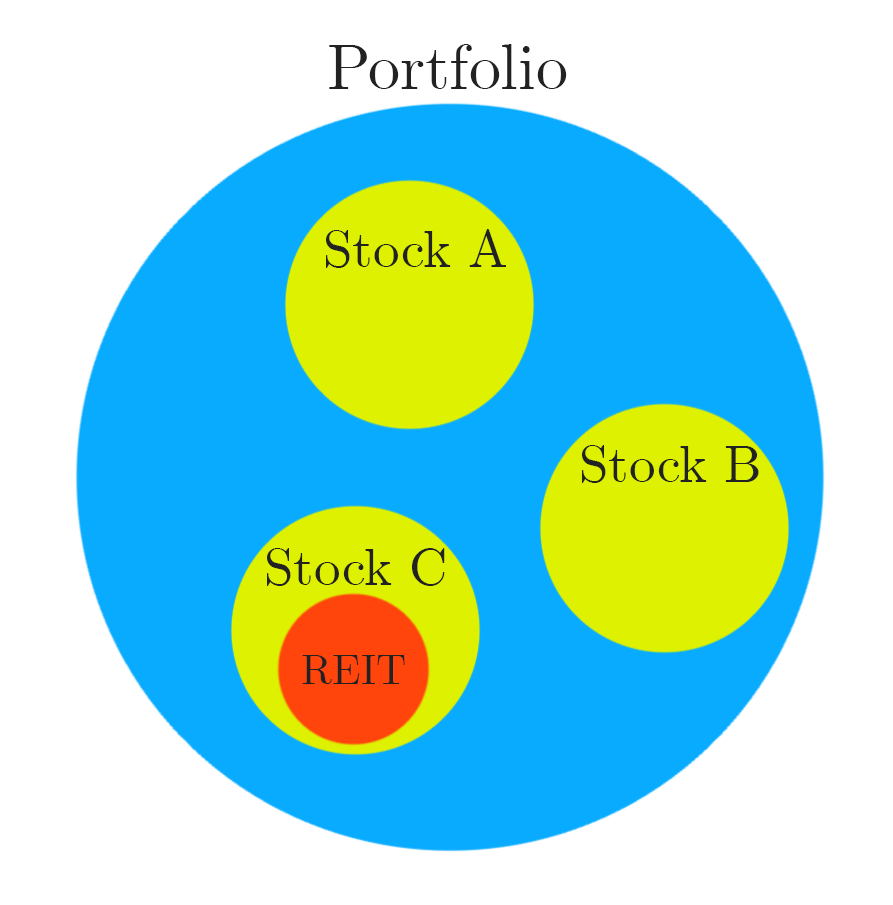
<style>
.page{position:relative;width:893px;height:905px;background:#ffffff}
.page>*{position:absolute;margin:0}
.t1{font:63.5px "CMUSerif-Roman";color:#222222}
.t2{font:52.9px "CMUSerif-Roman";color:#222222}
.t3{font:42.3px "CMUSerif-Roman";color:#222222}
</style>
<div class="page">
<p class="t1" style="left:329px;top:44px;width:238px;height:45px">Portfolio</p>
<p class="t2" style="left:326px;top:229px;width:180px;height:39px">Stock A</p>
<p class="t2" style="left:582px;top:445px;width:177px;height:38px">Stock B</p>
<p class="t2" style="left:267px;top:548px;width:178px;height:38px">Stock C</p>
<p class="t3" style="left:302px;top:655px;width:103px;height:29px">REIT</p>
</div>
